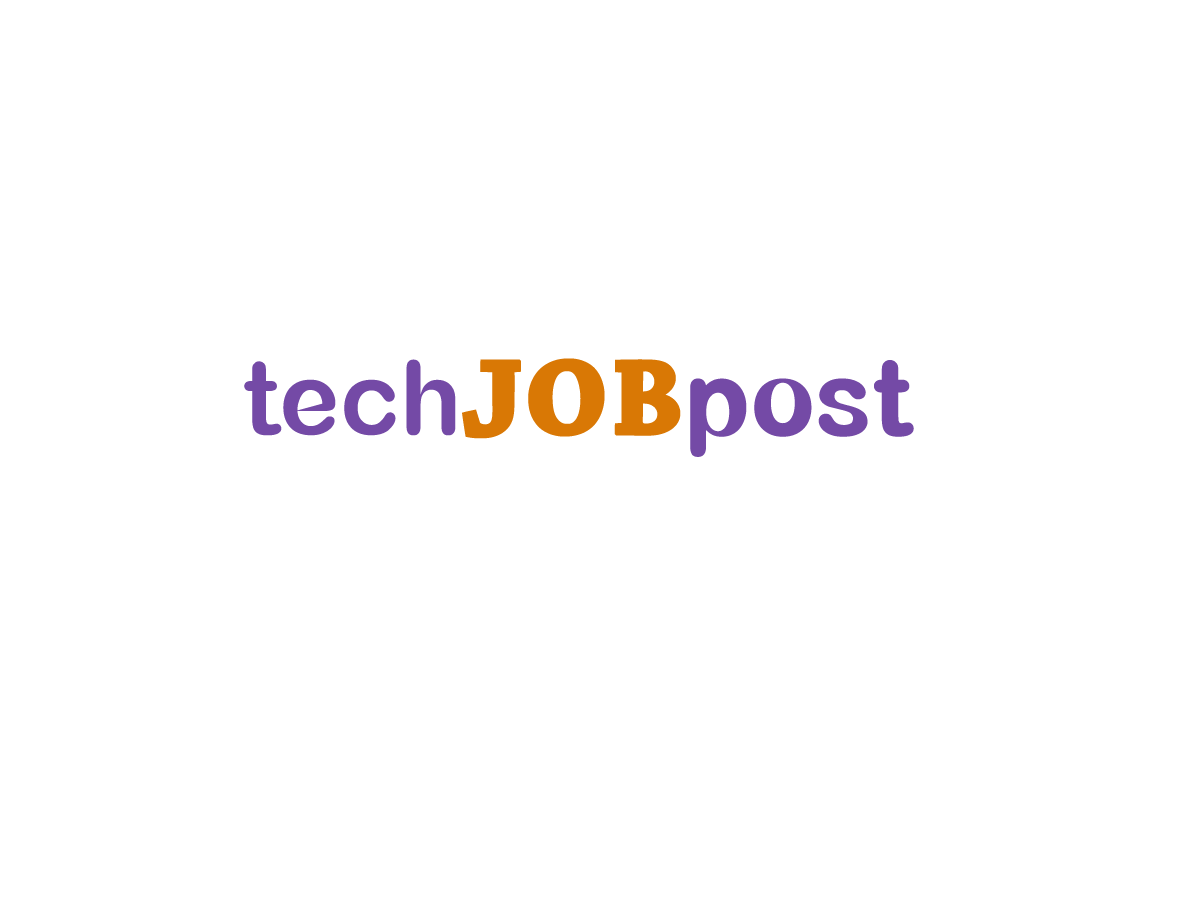
<style>
.page{position:relative;width:1200px;height:900px;background:#ffffff}
.page>*{position:absolute;margin:0}
.t1{font:102px "bubble-sharp";color:#744aa6}
.t2{font:112px "ChaparralPro-Bold";color:#d97805;font-weight:bold}
.t3{font:102px "bubble-sharp";color:#744aa6;font-weight:bold}
</style>
<div class="page">
<p class="t1" style="left:244px;top:358px;width:670px;height:99px">tech<span class="t2">JOB</span><span class="t3">post</span></p>
</div>
